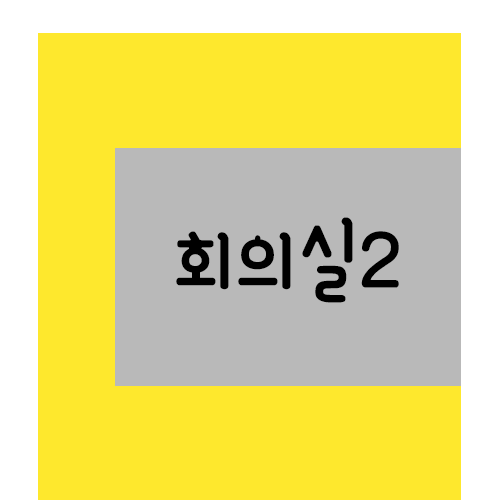
<style>
.page{position:relative;width:500px;height:500px;background:#fee82d}
.page>*{position:absolute;margin:0}
.t1{font:100px "YanoljaYacheR";color:#000000}
</style>
<div class="page">
<p class="t1" style="left:176px;top:217px;width:223px;height:86px">회의실2</p>
</div>
